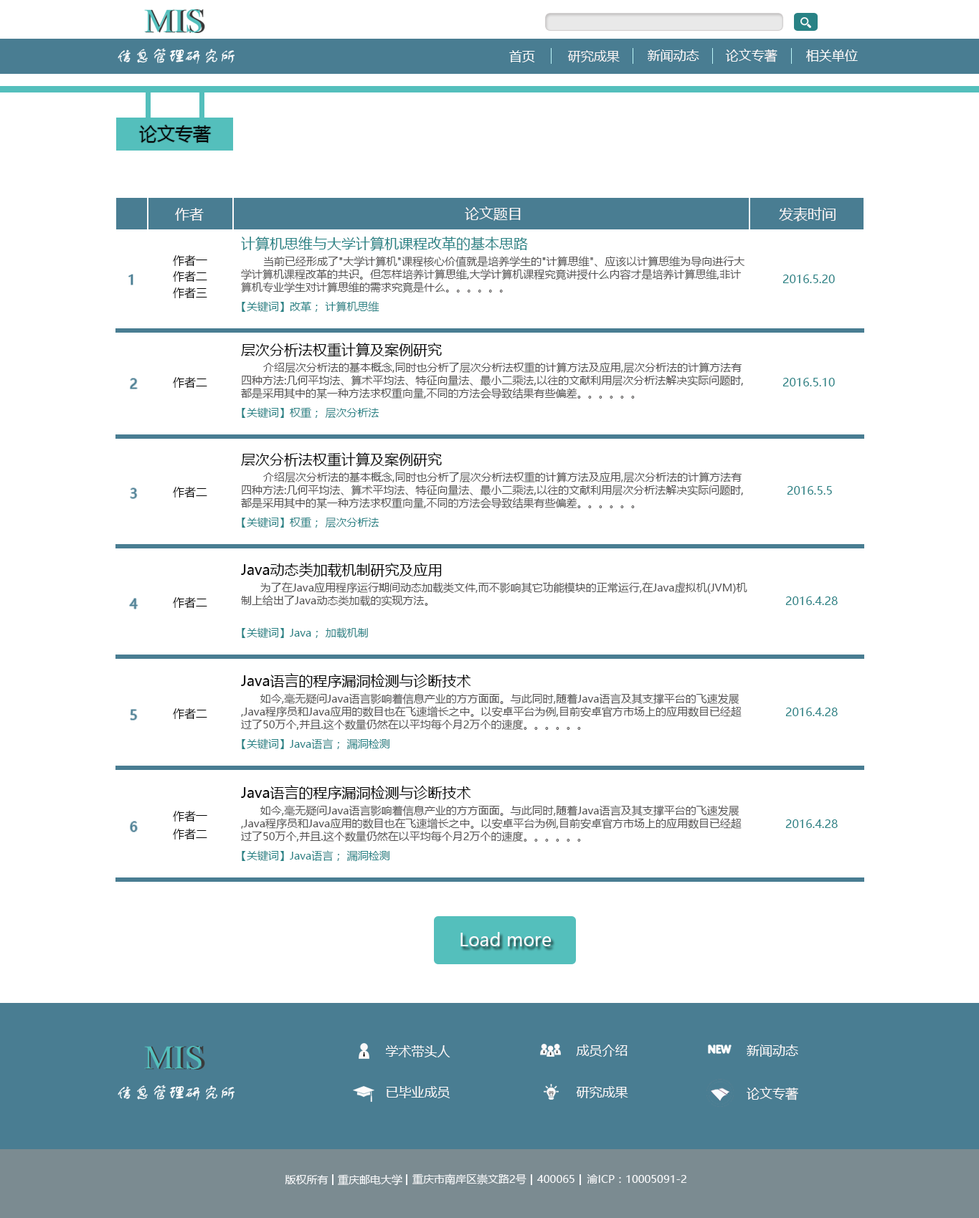
<style>
.page{position:relative;width:979px;height:1218px;background:#ffffff}
.page>*{position:absolute;margin:0}
.t1{font:12.9px "MicrosoftYaHei";color:#fefefe}
.t2{font:12.9px "MicrosoftYaHei";color:#f8f4f4}
.t3{font:12.9px "MicrosoftYaHei";color:#fefafa}
.t4{font:12.9px "MicrosoftYaHei";color:#fcf9f9}
.t5{font:12.9px "MicrosoftYaHei";color:#fdfcfc}
.t6{font:17.9px "MicrosoftYaHei";color:#060606}
.t7{font:14.3px "MicrosoftYaHei";color:#fcf7f7}
.t8{font:14.3px "MicrosoftYaHei";color:#288285}
.t9{font:11.5px "MicrosoftYaHei";color:#020202}
.t10{font:10.8px "MicrosoftYaHei";color:#525050}
.t11{font:11.5px "MicrosoftYaHei";color:#288285}
.t12{font:10.8px "MicrosoftYaHei";color:#288285}
.t13{font:14.3px "MicrosoftYaHei";color:#040404}
.t14{font:12.9px "MicrosoftYaHei";color:#497d92}
.t15{font:17.9px "MicrosoftYaHei";color:#f9fafc}
.t16{font:12.9px "MicrosoftYaHei";color:#fbf8f8}
.t17{font:12.9px "MicrosoftYaHei";color:#fcfafa}
.t18{font:12.9px "MicrosoftYaHei";color:#fdf8f8}
.t19{font:10.8px "MicrosoftYaHei";color:#f9fafc}
</style>
<div class="page">
<p class="t1" style="left:509px;top:50px;width:26px;height:12px">首页</p>
<p class="t2" style="left:567px;top:50px;width:53px;height:12px">研究成果</p>
<p class="t3" style="left:648px;top:49px;width:51px;height:13px">新闻动态</p>
<p class="t4" style="left:725px;top:49px;width:52px;height:13px">论文专著</p>
<p class="t5" style="left:806px;top:49px;width:52px;height:13px">相关单位</p>
<p class="t6" style="left:139px;top:125px;width:72px;height:18px">论文专著</p>
<p class="t7" style="left:175px;top:208px;width:29px;height:13px">作者</p>
<p class="t7" style="left:465px;top:207px;width:56px;height:14px">论文题目</p>
<p class="t7" style="left:779px;top:207px;width:56px;height:15px">发表时间</p>
<p class="t8" style="left:241px;top:237px;width:287px;height:14px">计算机思维与大学计算机课程改革的基本思路</p>
<p class="t9" style="left:173px;top:255px;width:34px;height:12px">作者一</p>
<p class="t10" style="left:241px;top:256px;width:504px;height:37px">当前已经形成了"大学计算机"课程核心价值就是培养学生的"计算思维"、应该以计算思维为导向进行大学计算机课程改革的共识。但怎样培养计算思维,大学计算机课程究竟讲授什么内容才是培养计算思维,非计算机专业学生对计算思维的需求究竟是什么。。。。。。</p>
<p class="t9" style="left:173px;top:270px;width:34px;height:13px">作者二</p>
<p class="t11" style="left:782px;top:275px;width:53px;height:8px">2016.5.20</p>
<p class="t9" style="left:173px;top:287px;width:34px;height:12px">作者三</p>
<p class="t12" style="left:242px;top:301px;width:42px;height:11px">【关键词】</p>
<p class="t12" style="left:290px;top:301px;width:89px;height:11px">改革； 计算机思维</p>
<p class="t13" style="left:241px;top:343px;width:201px;height:14px">层次分析法权重计算及案例研究</p>
<p class="t10" style="left:241px;top:362px;width:502px;height:37px">介绍层次分析法的基本概念,同时也分析了层次分析法权重的计算方法及应用,层次分析法的计算方法有四种方法:几何平均法、算术平均法、特征向量法、最小二乘法,以往的文献利用层次分析法解决实际问题时,都是采用其中的某一种方法求权重向量,不同的方法会导致结果有些偏差。。。。。。</p>
<p class="t9" style="left:173px;top:376px;width:34px;height:13px">作者二</p>
<p class="t11" style="left:782px;top:378px;width:53px;height:8px">2016.5.10</p>
<p class="t14" style="left:130px;top:379px;width:7px;height:10px">2</p>
<p class="t12" style="left:242px;top:407px;width:42px;height:11px">【关键词】</p>
<p class="t12" style="left:290px;top:407px;width:89px;height:11px">权重； 层次分析法</p>
<p class="t13" style="left:241px;top:452px;width:201px;height:15px">层次分析法权重计算及案例研究</p>
<p class="t10" style="left:241px;top:472px;width:502px;height:37px">介绍层次分析法的基本概念,同时也分析了层次分析法权重的计算方法及应用,层次分析法的计算方法有四种方法:几何平均法、算术平均法、特征向量法、最小二乘法,以往的文献利用层次分析法解决实际问题时,都是采用其中的某一种方法求权重向量,不同的方法会导致结果有些偏差。。。。。。</p>
<p class="t14" style="left:131px;top:488px;width:6px;height:10px">3</p>
<p class="t9" style="left:173px;top:486px;width:34px;height:12px">作者二</p>
<p class="t11" style="left:787px;top:486px;width:45px;height:9px">2016.5.5</p>
<p class="t12" style="left:242px;top:517px;width:42px;height:11px">【关键词】</p>
<p class="t12" style="left:290px;top:517px;width:89px;height:11px">权重； 层次分析法</p>
<p class="t13" style="left:241px;top:563px;width:201px;height:14px">Java动态类加载机制研究及应用</p>
<p class="t10" style="left:241px;top:582px;width:506px;height:25px">为了在Java应用程序运行期间动态加载类文件,而不影响其它功能模块的正常运行,在Java虚拟机(JVM)机制上给出了Java动态类加载的实现方法。</p>
<p class="t14" style="left:130px;top:599px;width:8px;height:10px">4</p>
<p class="t9" style="left:173px;top:597px;width:34px;height:12px">作者二</p>
<p class="t11" style="left:785px;top:597px;width:53px;height:8px">2016.4.28</p>
<p class="t12" style="left:242px;top:627px;width:42px;height:11px">【关键词】</p>
<p class="t12" style="left:290px;top:627px;width:78px;height:11px">Java； 加载机制</p>
<p class="t13" style="left:241px;top:673px;width:230px;height:15px">Java语言的程序漏洞检测与诊断技术</p>
<p class="t10" style="left:241px;top:693px;width:500px;height:38px">如今,毫无疑问Java语言影响着信息产业的方方面面。与此同时,随着Java语言及其支撑平台的飞速发展,Java程序员和Java应用的数目也在飞速增长之中。以安卓平台为例,目前安卓官方市场上的应用数目已经超过了50万个,并且.这个数量仍然在以平均每个月2万个的速度。。。。。。</p>
<p class="t14" style="left:131px;top:710px;width:6px;height:10px">5</p>
<p class="t9" style="left:173px;top:708px;width:34px;height:12px">作者二</p>
<p class="t11" style="left:785px;top:708px;width:53px;height:8px">2016.4.28</p>
<p class="t12" style="left:242px;top:739px;width:42px;height:10px">【关键词】</p>
<p class="t12" style="left:290px;top:739px;width:99px;height:11px">Java语言； 漏洞检测</p>
<p class="t13" style="left:241px;top:785px;width:230px;height:15px">Java语言的程序漏洞检测与诊断技术</p>
<p class="t10" style="left:241px;top:805px;width:500px;height:38px">如今,毫无疑问Java语言影响着信息产业的方方面面。与此同时,随着Java语言及其支撑平台的飞速发展,Java程序员和Java应用的数目也在飞速增长之中。以安卓平台为例,目前安卓官方市场上的应用数目已经超过了50万个,并且.这个数量仍然在以平均每个月2万个的速度。。。。。。</p>
<p class="t14" style="left:130px;top:822px;width:7px;height:10px">6</p>
<p class="t9" style="left:173px;top:810px;width:34px;height:12px">作者一</p>
<p class="t11" style="left:785px;top:820px;width:53px;height:8px">2016.4.28</p>
<p class="t9" style="left:173px;top:828px;width:34px;height:12px">作者二</p>
<p class="t12" style="left:242px;top:850px;width:42px;height:11px">【关键词】</p>
<p class="t12" style="left:290px;top:850px;width:99px;height:12px">Java语言； 漏洞检测</p>
<p class="t15" style="left:460px;top:932px;width:91px;height:15px">Load more</p>
<p class="t16" style="left:385px;top:1045px;width:65px;height:13px">学术带头人</p>
<p class="t16" style="left:576px;top:1045px;width:51px;height:12px">成员介绍</p>
<p class="t17" style="left:746px;top:1045px;width:52px;height:12px">新闻动态</p>
<p class="t16" style="left:386px;top:1086px;width:64px;height:13px">已毕业成员</p>
<p class="t16" style="left:576px;top:1086px;width:52px;height:13px">研究成果</p>
<p class="t18" style="left:746px;top:1087px;width:52px;height:14px">论文专著</p>
<p class="t19" style="left:285px;top:1175px;width:43px;height:10px">版权所有</p>
<p class="t19" style="left:338px;top:1175px;width:64px;height:11px">重庆邮电大学</p>
<p class="t19" style="left:412px;top:1174px;width:114px;height:11px">重庆市南岸区崇文路2号</p>
<p class="t19" style="left:537px;top:1175px;width:37px;height:8px">400065</p>
<p class="t19" style="left:587px;top:1175px;width:100px;height:9px">渝ICP：10005091-2</p>
</div>
